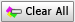
<style>
.page{position:relative;width:75px;height:22px}
.page>*{position:absolute;margin:0}
.t1{font:11.2px "Tahoma";letter-spacing:0.1em;color:#000000;scale:0.86 1}
</style>
<div class="page">
<p class="t1" style="left:26px;top:6px;width:42px;height:9px">Clear All</p>
</div>
